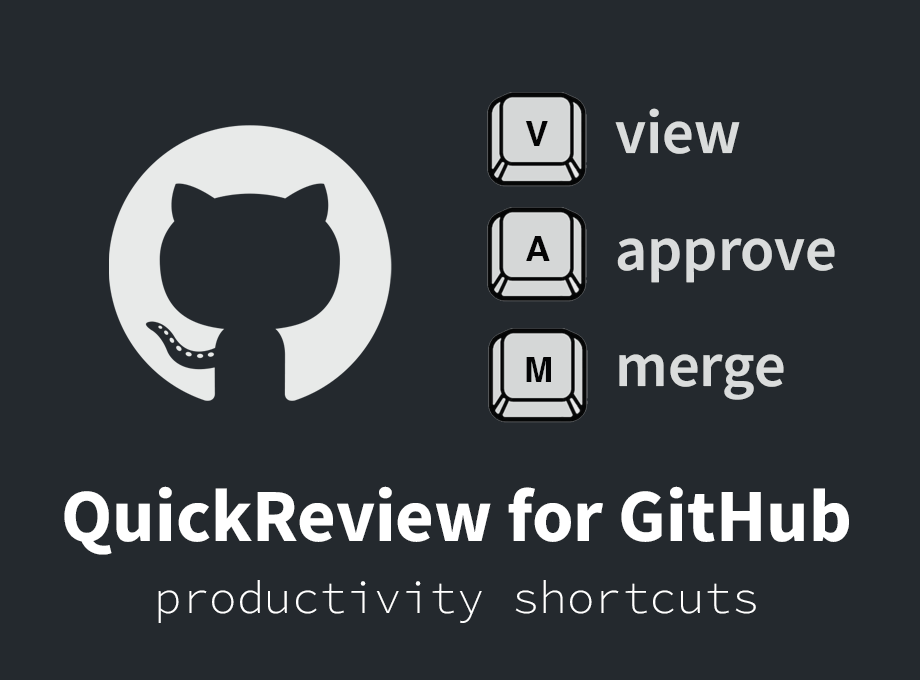
<style>
.page{position:relative;width:920px;height:680px;background:#24292e}
.page>*{position:absolute;margin:0}
.t1{font:62.5px/116.7px "SourceSansRoman-Semibold";color:#e8eae9}
.t2{font:34.9px "Helvetica-Bold";color:#000000}
.t3{font:75px "SourceSansRoman-Bold";color:#ffffff}
.t4{font:45.8px "SourceCodeRoman-Light";color:#ffffff}
</style>
<div class="page">
<p class="t1" style="left:615px;top:108px;width:220px;height:292px;opacity:0.9">view<br>approve<br>merge</p>
<p class="t2" style="left:525px;top:121px;width:23px;height:25px">V</p>
<p class="t2" style="left:526px;top:236px;width:24px;height:25px">A</p>
<p class="t2" style="left:526px;top:357px;width:25px;height:25px">M</p>
<p class="t3" style="left:64px;top:486px;width:785px;height:69px">QuickReview for GitHub</p>
<p class="t4" style="left:158px;top:580px;width:598px;height:43px">productivity shortcuts</p>
</div>
